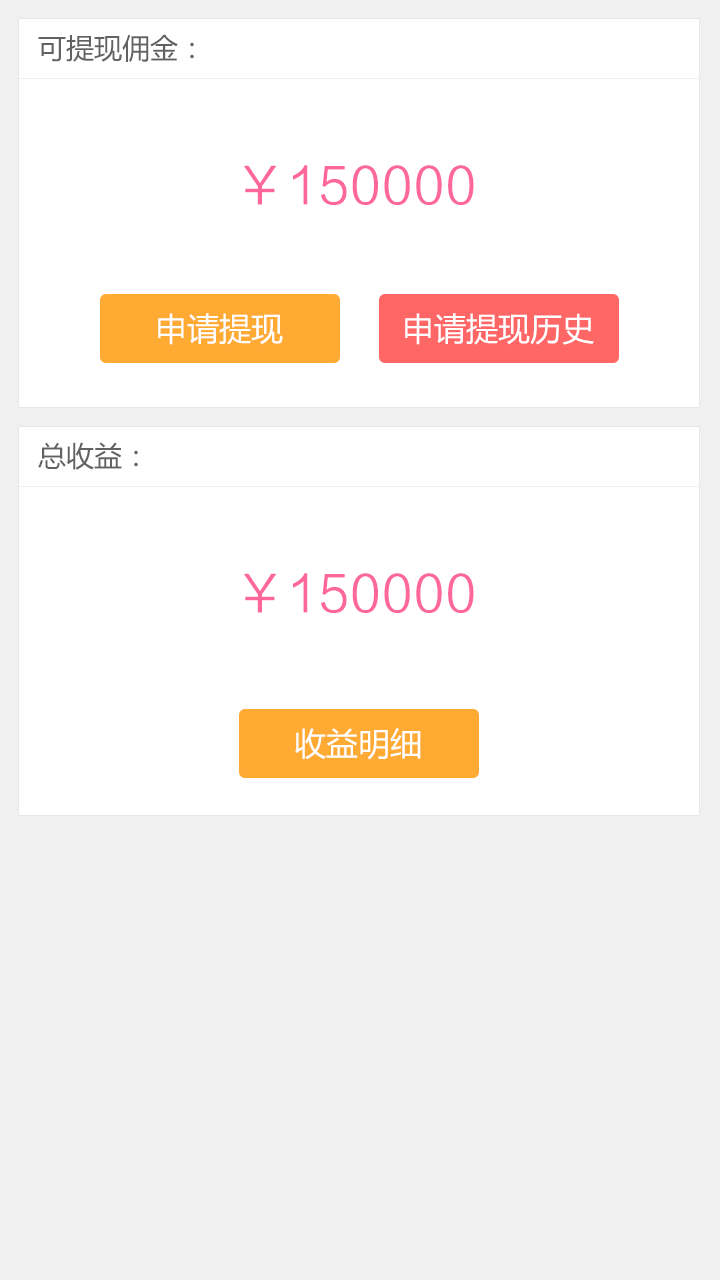
<style>
.page{position:relative;width:720px;height:1280px;background:#ffffff}
.page>*{position:absolute;margin:0}
.t1{font:28px "MicrosoftYaHei";color:#626262;text-transform:uppercase}
.t2{font:50px "FZLTXHK--GBK1-0";color:#fd679a;text-transform:uppercase;font-weight:bold}
.t3{font:32px "MicrosoftYaHei";color:#ffffff}
</style>
<div class="page">
<p class="t1" style="left:38px;top:34px;width:156px;height:28px">可提现佣金：</p>
<p class="t2" style="left:244px;top:165px;width:230px;height:40px">￥150000</p>
<p class="t3" style="left:158px;top:313px;width:125px;height:32px">申请提现</p>
<p class="t3" style="left:405px;top:313px;width:189px;height:32px">申请提现历史</p>
<p class="t1" style="left:38px;top:442px;width:100px;height:28px">总收益：</p>
<p class="t2" style="left:244px;top:573px;width:230px;height:40px">￥150000</p>
<p class="t3" style="left:295px;top:728px;width:126px;height:32px">收益明细</p>
</div>
